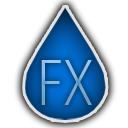
<style>
.page{position:relative;width:128px;height:128px;background:#ffffff}
.page>*{position:absolute;margin:0}
.t1{font:58.9px "KozGoPro-Light";scale:0.86 1}
</style>
<div class="page">
<p class="t1" style="left:41px;top:60px;width:51px;height:45px">FX</p>
</div>
